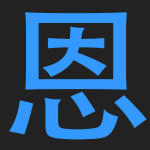
<style>
.page{position:relative;width:150px;height:150px;background:#222222}
.page>*{position:absolute;margin:0}
.t1{font:151.3px "AdobeHeitiStd-Regular";color:#3399ff}
</style>
<div class="page">
<p class="t1" style="left:9px;top:12px;width:138px;height:128px">恩</p>
</div>
